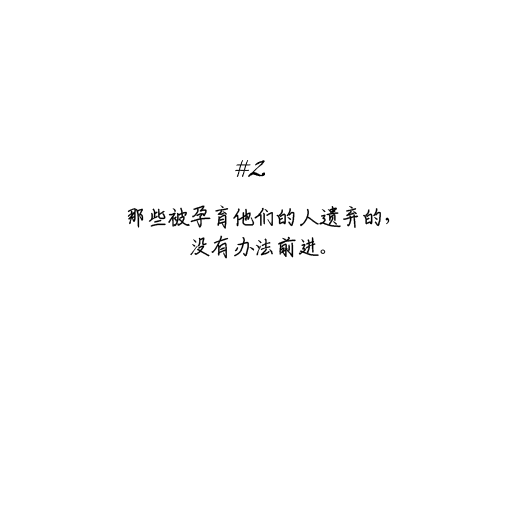
<style>
.page{position:relative;width:512px;height:512px;background:#ffffff}
.page>*{position:absolute;margin:0}
.t1{font:24px/30px "ShouShuti";letter-spacing:-0.1em;color:#000000}
</style>
<div class="page">
<p class="t1" style="left:127px;top:205px;width:263px;height:54px;text-align:center">那些被孕育他们的人遗弃的，<br>没有办法前进。</p>
</div>
